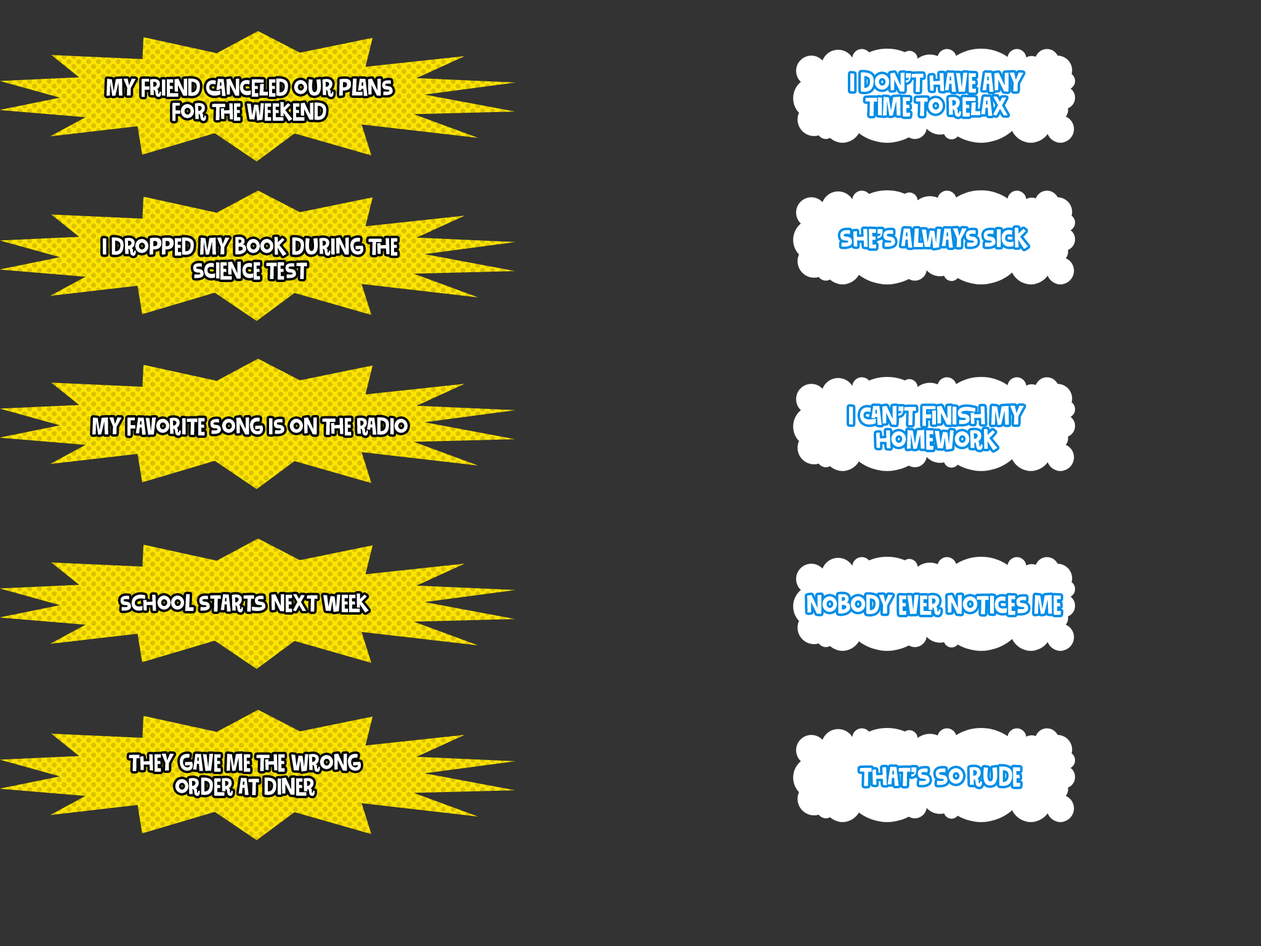
<style>
.page{position:relative;width:1261px;height:946px;background:#333333}
.page>*{position:absolute;margin:0}
.t1{font:24.6px/24px "Gumbutcha";color:#ffffff;scale:0.92 1}
.t2{font:22.2px/24px "Gumbutcha";color:#ffffff;scale:0.92 1}
.t3{font:24.6px "Gumbutcha";color:#ffffff;scale:0.92 1}
.t4{font:22.2px "Gumbutcha";color:#ffffff;scale:0.92 1}
</style>
<div class="page">
<p class="t1" style="left:850px;top:72px;width:173px;height:45px;text-align:center">I don’t have any<br>time to relax</p>
<p class="t2" style="left:107px;top:78px;width:286px;height:43px;text-align:center">My friend canceled our plans<br>for the weekend</p>
<p class="t3" style="left:840px;top:227px;width:188px;height:22px">She’s always sick</p>
<p class="t2" style="left:103px;top:236px;width:295px;height:44px;text-align:center">I dropped my book during the<br>science test</p>
<p class="t1" style="left:849px;top:405px;width:175px;height:46px;text-align:center">I can’t finish my<br>homework</p>
<p class="t4" style="left:92px;top:417px;width:316px;height:19px">My favorite song is on the radio</p>
<p class="t4" style="left:120px;top:593px;width:249px;height:20px">School starts next week</p>
<p class="t3" style="left:807px;top:594px;width:254px;height:21px">Nobody Ever notices me</p>
<p class="t2" style="left:129px;top:753px;width:232px;height:43px;text-align:center">They gave me the wrong<br>order at diner</p>
<p class="t3" style="left:859px;top:766px;width:161px;height:21px">That’s so Rude</p>
</div>
